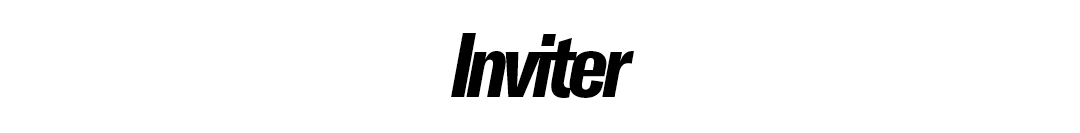
<style>
.page{position:relative;width:1080px;height:133px;background:#ffffff}
.page>*{position:absolute;margin:0}
.t1{font:89.7px "GTAmericaTrial-CmBdIt";letter-spacing:-0.064em;color:#000000;scale:1.05 1}
</style>
<div class="page">
<p class="t1" style="left:451px;top:33px;width:183px;height:65px">Invitér</p>
</div>
